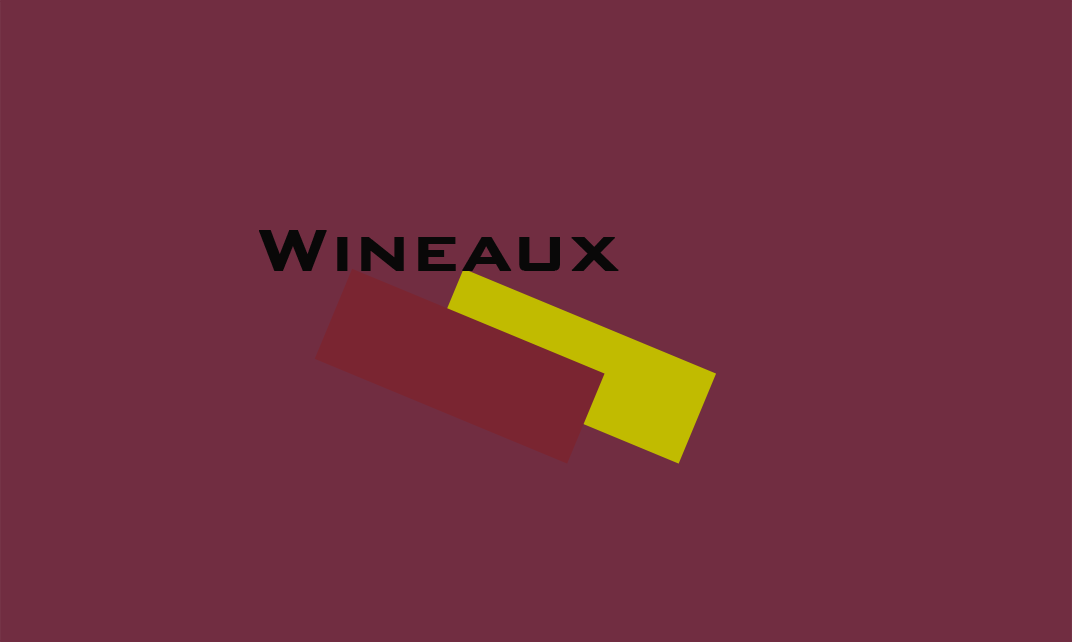
<style>
.page{position:relative;width:1072px;height:642px;background:#712d41}
.page>*{position:absolute;margin:0}
.t1{font:77.2px "BankGothic-Medium";color:#090808;font-weight:bold}
</style>
<div class="page">
<p class="t1" style="left:259px;top:230px;width:360px;height:41px">Wineaux</p>
</div>
